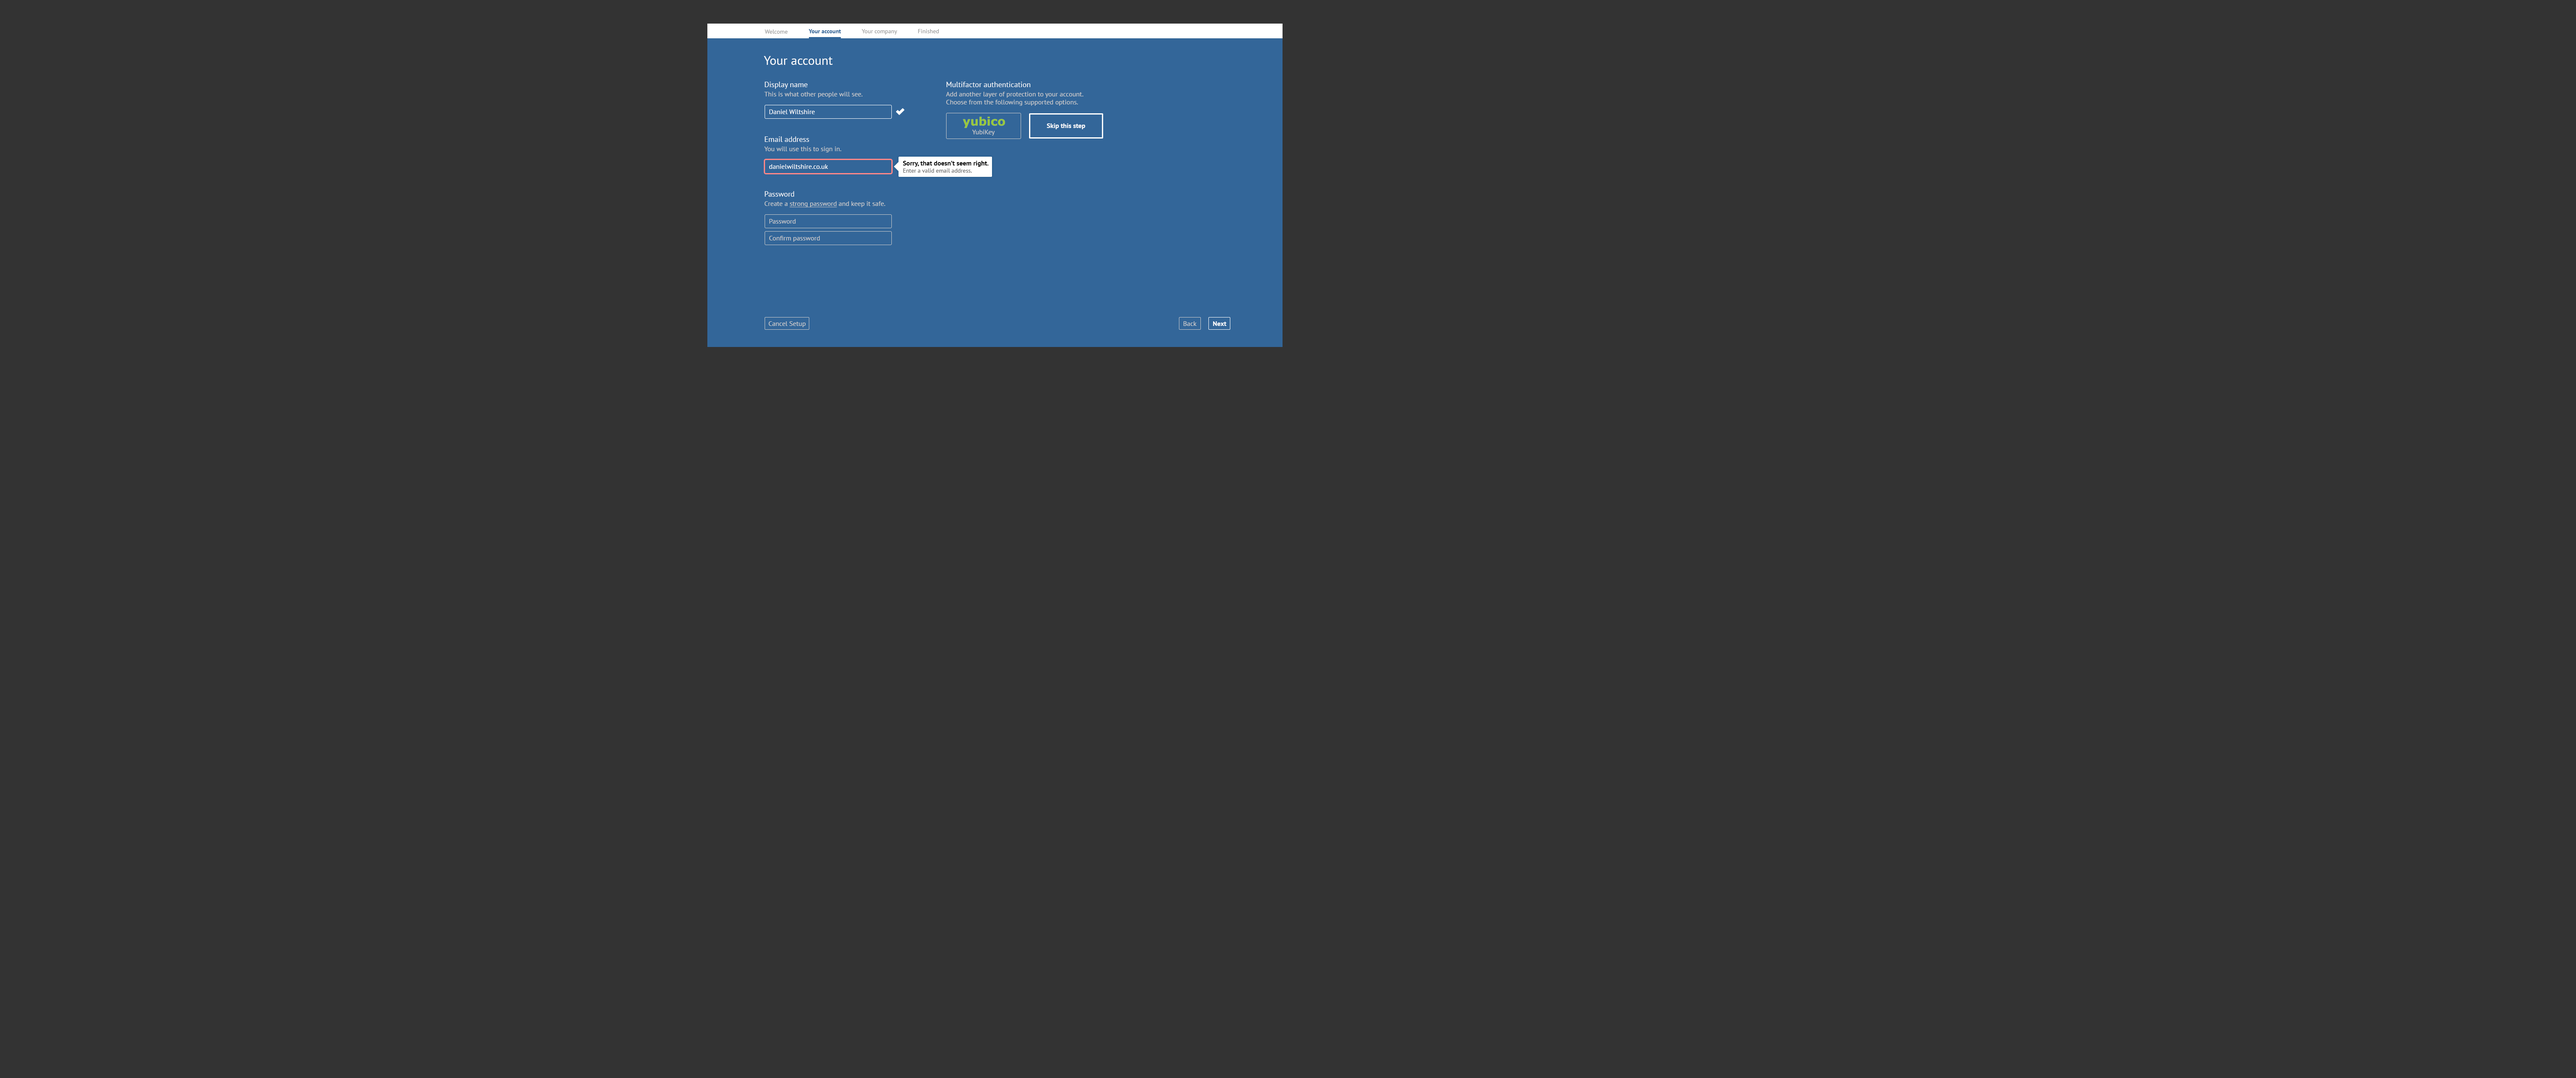
<style>
.page{position:relative;width:2576px;height:1078px;background:#333333}
.page>*{position:absolute;margin:0}
.t1{font:5.9px "PTSans-Regular";color:#999999}
.t2{font:5.9px "PTSans-Bold";color:#336699}
.t3{font:12.6px "PTSans-Regular";color:#ffffff}
.t4{font:7.6px "PTSans-Regular";color:#ffffff}
.t5{font:6.7px "PTSans-Regular";color:#cccccc}
.t6{font:6.7px "PTSans-Regular";color:#ffffff}
.t7{font:6.7px "PTSans-Bold";color:#ffffff}
.t8{font:6.7px "PTSans-Bold";color:#000000}
.t9{font:5.9px "PTSans-Regular";color:#666666}
.t10{font:6.7px "PTSans-Regular";color:#cccccc;text-decoration:underline}
</style>
<div class="page">
<p class="t1" style="left:765px;top:29px;width:23px;height:5px">Welcome</p>
<p class="t2" style="left:808px;top:29px;width:33px;height:4px">Your account</p>
<p class="t1" style="left:861px;top:29px;width:36px;height:6px">Your company</p>
<p class="t1" style="left:918px;top:29px;width:21px;height:4px">Finished</p>
<p class="t3" style="left:764px;top:56px;width:69px;height:9px">Your account</p>
<p class="t4" style="left:765px;top:82px;width:43px;height:7px">Display name</p>
<p class="t4" style="left:947px;top:82px;width:83px;height:5px">Multifactor authentication</p>
<p class="t5" style="left:764px;top:92px;width:99px;height:6px">This is what other people will see.</p>
<p class="t5" style="left:946px;top:92px;width:137px;height:14px">Add another layer of protection to your account.<br>Choose from the following supported options.</p>
<p class="t6" style="left:769px;top:109px;width:46px;height:5px">Daniel Wiltshire</p>
<p class="t7" style="left:1047px;top:123px;width:38px;height:6px">Skip this step</p>
<p class="t4" style="left:765px;top:136px;width:44px;height:6px">Email address</p>
<p class="t5" style="left:972px;top:130px;width:23px;height:6px">YubiKey</p>
<p class="t5" style="left:764px;top:147px;width:77px;height:5px">You will use this to sign in.</p>
<p class="t8" style="left:903px;top:161px;width:86px;height:12px">Sorry, that doesn’t seem right.<br><span class="t9">Enter a valid email address.</span></p>
<p class="t6" style="left:769px;top:164px;width:59px;height:5px">danielwiltshire.co.uk</p>
<p class="t4" style="left:765px;top:191px;width:29px;height:6px">Password</p>
<p class="t5" style="left:765px;top:201px;width:120px;height:7px">Create a <span class="t10">strong password</span> and keep it safe.</p>
<p class="t5" style="left:769px;top:219px;width:27px;height:5px">Password</p>
<p class="t5" style="left:769px;top:236px;width:51px;height:6px">Confirm password</p>
<p class="t5" style="left:768px;top:321px;width:38px;height:6px">Cancel Setup</p>
<p class="t5" style="left:1184px;top:321px;width:13px;height:5px">Back</p>
<p class="t7" style="left:1213px;top:321px;width:14px;height:5px">Next</p>
</div>
